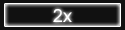
<style>
.page{position:relative;width:125px;height:30px;background:#111111}
.page>*{position:absolute;margin:0}
.t1{font:18px "ArialMT";color:#ffffff}
</style>
<div class="page">
<p class="t1" style="left:53px;top:9px;width:19px;height:13px">2x</p>
</div>
